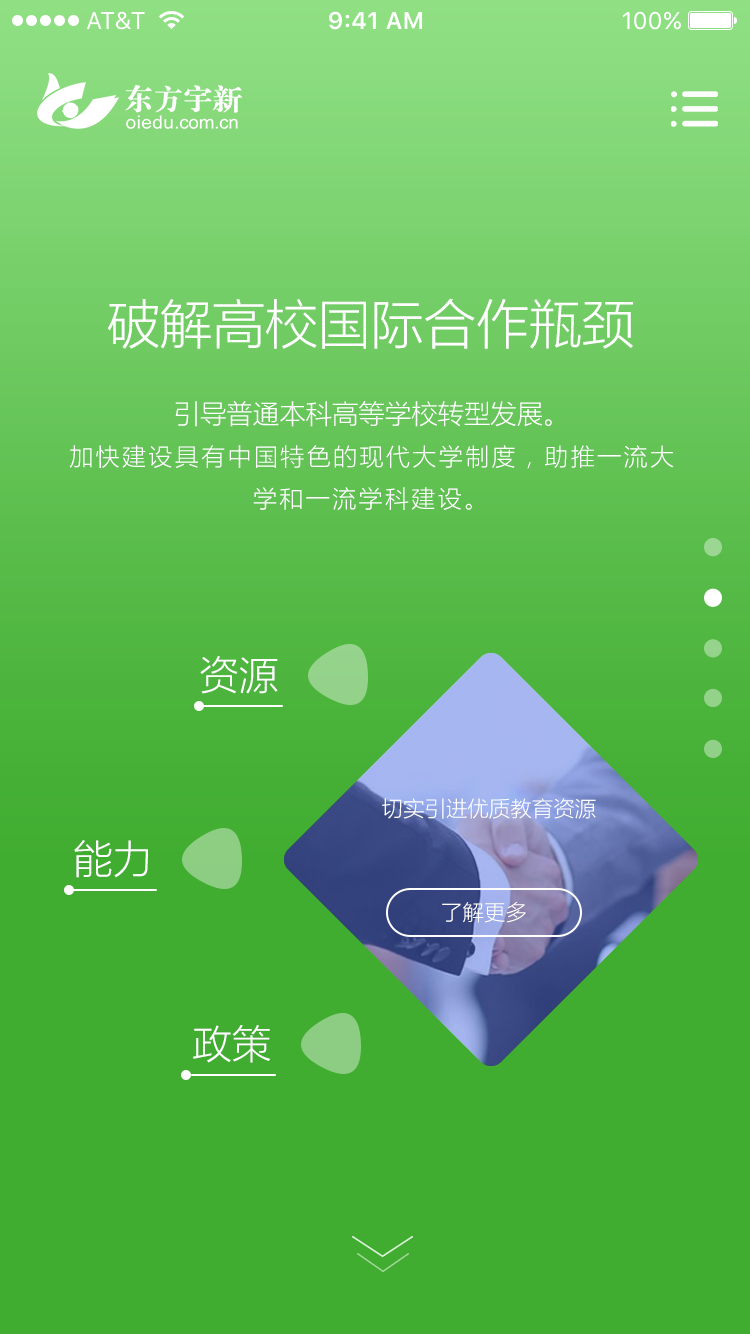
<style>
.page{position:relative;width:750px;height:1334px;background:#40ac30}
.page>*{position:absolute;margin:0}
.t1{font:52.8px "MicrosoftYaHeiLight";color:#ffffff}
.t2{font:24px "MicrosoftYaHeiLight";letter-spacing:0.1em;color:#ffffff}
.t3{font:26.4px "MicrosoftYaHeiLight";color:#ffffff}
.t4{font:39.6px "MicrosoftYaHeiLight";color:#ffffff}
.t5{font:21.4px "MicrosoftYaHeiLight";color:#ffffff}
</style>
<div class="page">
<p class="t1" style="left:107px;top:298px;width:526px;height:51px">破解高校国际合作瓶颈</p>
<p class="t2" style="left:69px;top:401px;width:605px;height:109px;text-align:center"><span class="t3">引导普通本科高等学校转型发展。<br></span>加快建设具有中国特色的现代大学制度，助推一流大学和一流学科建设。</p>
<p class="t4" style="left:200px;top:656px;width:78px;height:38px">资源</p>
<p class="t5" style="left:382px;top:798px;width:214px;height:21px">切实引进优质教育资源</p>
<p class="t4" style="left:74px;top:840px;width:74px;height:38px">能力</p>
<p class="t5" style="left:442px;top:902px;width:84px;height:21px">了解更多</p>
<p class="t4" style="left:193px;top:1025px;width:78px;height:38px">政策</p>
</div>
